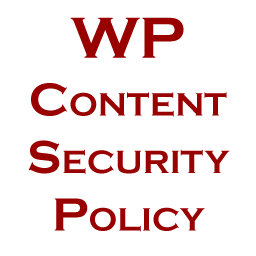
<style>
.page{position:relative;width:256px;height:256px;background:#ffffff}
.page>*{position:absolute;margin:0}
.t1{font:48px "CopperplateGothic-Bold";color:#990000;font-variant:small-caps}
.t2{font:60px/60px "CopperplateGothic-Bold";color:#990000;font-variant:small-caps}
</style>
<div class="page">
<p class="t1" style="left:28px;top:17px;width:202px;height:215px;text-align:center"><span class="t2">WP<br></span>Content <br>Security Policy</p>
</div>
